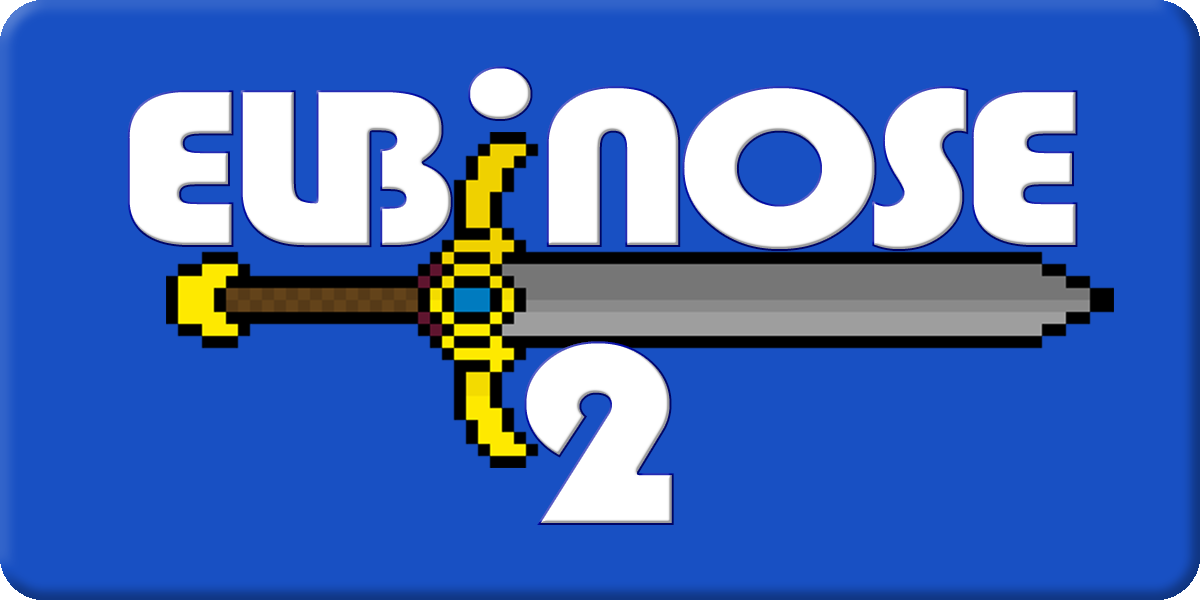
<style>
.page{position:relative;width:1200px;height:600px;background:#1850c3}
.page>*{position:absolute;margin:0}
.t1{font:235.2px "Bauhaus93";letter-spacing:-0.075em;color:#ffffff;scale:1.18 1}
.t2{font:268.8px "Bauhaus93";letter-spacing:-0.075em;color:#ffffff;scale:1.18 1}
</style>
<div class="page">
<p class="t1" style="left:468px;top:66px;width:65px;height:55px">.</p>
<p class="t1" style="left:127px;top:86px;width:951px;height:165px">ELB  NOSE</p>
<p class="t2" style="left:524px;top:341px;width:150px;height:184px">2</p>
</div>
